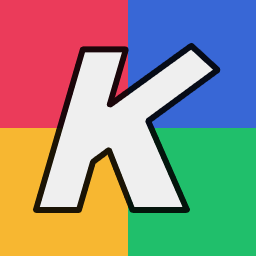
<style>
.page{position:relative;width:256px;height:256px}
.page>*{position:absolute;margin:0}
.t1{font:246px "Catamaran-Black";color:#efefef;scale:0.96 1}
</style>
<div class="page">
<p class="t1" style="left:35px;top:45px;width:183px;height:165px">K</p>
</div>
